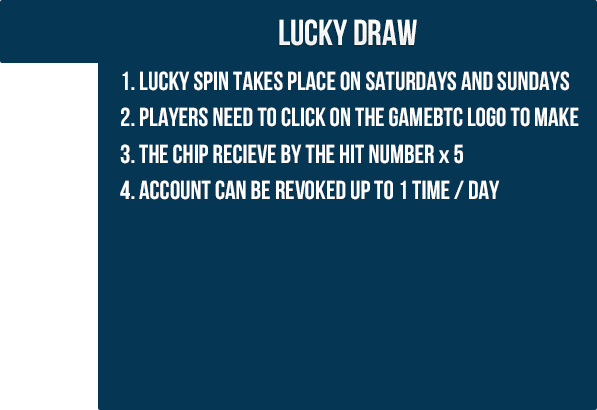
<style>
.page{position:relative;width:597px;height:410px;background:#053754}
.page>*{position:absolute;margin:0}
.t1{font:36px "UTM-Bebas";color:#ffffff}
.t2{font:26px "UTM-Bebas";color:#ffffff}
.t3{font:18.2px "UTM-Bebas";color:#ffffff;scale:1.43 1}
</style>
<div class="page">
<p class="t1" style="left:279px;top:19px;width:138px;height:27px">lucky draw</p>
<p class="t2" style="left:120px;top:71px;width:459px;height:129px">1. Lucky spin takes place on Saturdays and Sundays<br>2. Players need to click on the GameBTC logo to make <br>3. The chip recieve by the hit number <span class="t3">x</span> 5<br>4. Account can be revoked up to 1 time / day</p>
</div>
